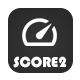
<style>
.page{position:relative;width:80px;height:80px;background:#ffffff}
.page>*{position:absolute;margin:0}
.t1{font:15px "Bauhaus93";color:#ffffff}
</style>
<div class="page">
<p class="t1" style="left:13px;top:56px;width:53px;height:12px">SCORE2</p>
</div>
